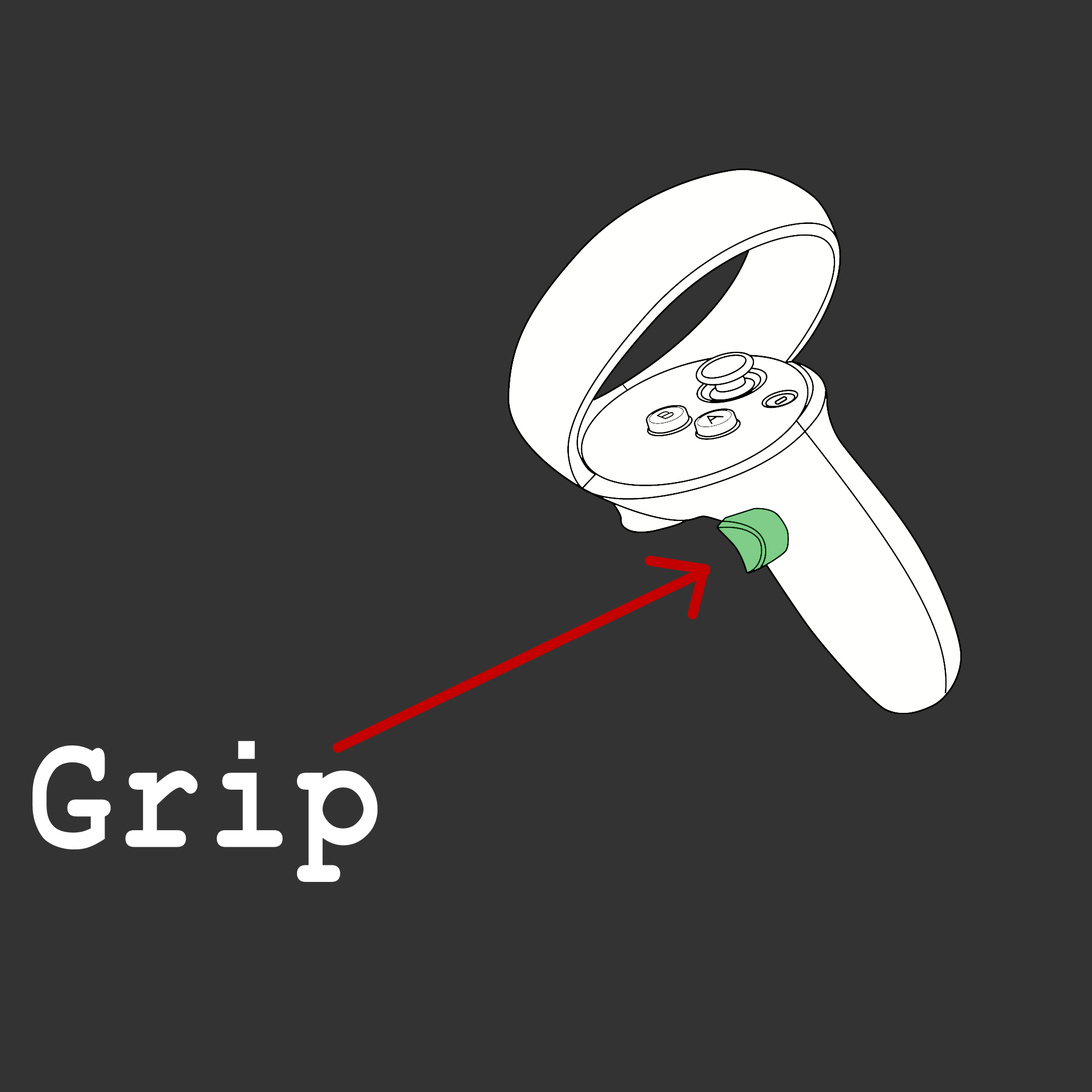
<style>
.page{position:relative;width:1092px;height:1092px;background:#333333}
.page>*{position:absolute;margin:0}
.t1{font:167.1px "CourierNewPS-BoldMT";letter-spacing:0.05em;color:#ffffff;scale:0.83 1}
</style>
<div class="page">
<p class="t1" style="left:33px;top:741px;width:345px;height:141px">Grip</p>
</div>
